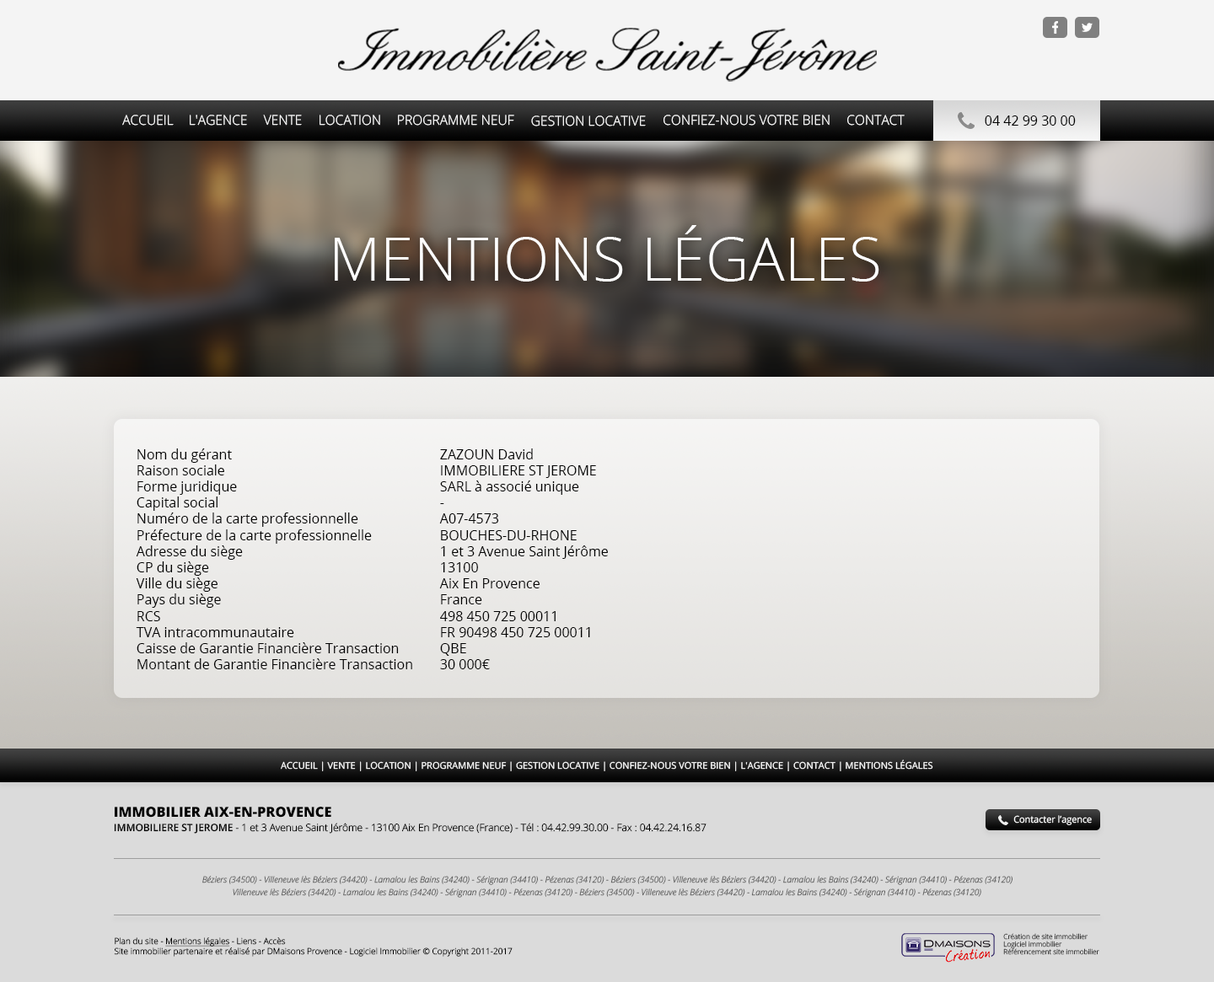
<style>
.page{position:relative;width:1214px;height:982px}
.page>*{position:absolute;margin:0}
.t1{font:13.5px "OpenSans-Light";color:#ffffff;text-transform:uppercase}
.t2{font:13.5px "OpenSans";color:#000000;text-transform:uppercase}
.t3{font:60.1px "OpenSans-Light";color:#ffffff;text-transform:uppercase}
.t4{font:13.5px "OpenSans";color:#000000}
.t5{font:9.3px "OpenSans";color:#ffffff;text-transform:uppercase}
.t6{font:10px/13.9px "OpenSans-Light";color:#000000}
.t7{font:13.9px/21.6px "OpenSans-Extrabold";color:#000000}
.t8{font:10px/13.9px "OpenSans-Semibold";color:#000000}
.t9{font:9.5px "OpenSans";color:#ffffff;scale:0.96 1}
.t10{font:8.5px "OpenSansLight-Italic";color:#626262}
.t11{font:8.5px/10px "OpenSans-Light";color:#010101}
.t12{font:8.5px/10px "OpenSans-Light";color:#010101;text-decoration:underline}
.t13{font:6.9px/7.7px "OpenSans-Light";color:#3b3b3b}
</style>
<div class="page">
<p class="t1" style="left:122px;top:115px;width:52px;height:11px">Accueil</p>
<p class="t1" style="left:190px;top:115px;width:57px;height:11px">L'agence</p>
<p class="t1" style="left:263px;top:115px;width:39px;height:11px">VENTE</p>
<p class="t1" style="left:320px;top:115px;width:60px;height:11px">LOCATION</p>
<p class="t1" style="left:398px;top:115px;width:116px;height:11px">Programme neuf</p>
<p class="t1" style="left:531px;top:116px;width:115px;height:10px">GESTION LOCATIVE</p>
<p class="t1" style="left:664px;top:115px;width:166px;height:11px">Confiez-nous votre bien</p>
<p class="t1" style="left:847px;top:115px;width:58px;height:11px">Contact</p>
<p class="t2" style="left:985px;top:116px;width:91px;height:10px">04 42 99 30 00</p>
<p class="t3" style="left:335px;top:225px;width:544px;height:57px">Mentions Légales</p>
<p class="t4" style="left:136px;top:449px;width:472px;height:220px">Nom du gérant                                           ZAZOUN David<br>Raison sociale                                                   IMMOBILIERE ST JEROME<br>Forme juridique                                          SARL à associé unique<br>Capital social                                                   -<br>Numéro de la carte professionnelle        A07-4573<br>Préfecture de la carte professionnelle        BOUCHES-DU-RHONE<br>Adresse du siège                                          1 et 3 Avenue Saint Jérôme<br>CP du siège                                                  13100<br>Ville du siège                                                   Aix En Provence<br>Pays du siège                                                   France<br>RCS              498 450 725 00011<br>TVA intracommunautaire         FR 90498 450 725 00011<br>Caisse de Garantie Financière Transaction  QBE<br>Montant de Garantie Financière Transaction 30 000€</p>
<p class="t5" style="left:281px;top:760px;width:652px;height:11px">ACCUEIL | VENTE | LOCATION | PROGRAMME NEUF | GESTION LOCATIVE | CONFIEZ-NOUS VOTRE BIEN | L'AGENCE | CONTACT | MENTIONS LÉGALES</p>
<p class="t6" style="left:114px;top:807px;width:593px;height:27px"><span class="t7">IMMOBILIER AIX-EN-PROVENCE<br></span><span class="t8">IMMOBILIERE ST JEROME</span> - 1 et 3 Avenue Saint Jérôme - 13100 Aix En Provence (France) - Tél : 04.42.99.30.00 - Fax : 04.42.24.16.87</p>
<p class="t9" style="left:1013px;top:815px;width:79px;height:10px">Contacter l’agence</p>
<p class="t10" style="left:202px;top:876px;width:811px;height:9px">Béziers (34500) - Villeneuve lès Béziers (34420) - Lamalou les Bains (34240) - Sérignan (34410) - Pézenas (34120) - Béziers (34500) - Villeneuve lès Béziers (34420) - Lamalou les Bains (34240) - Sérignan (34410) - Pézenas (34120)</p>
<p class="t10" style="left:233px;top:889px;width:748px;height:9px">Villeneuve lès Béziers (34420) - Lamalou les Bains (34240) - Sérignan (34410) - Pézenas (34120) - Béziers (34500) - Villeneuve lès Béziers (34420) - Lamalou les Bains (34240) - Sérignan (34410) - Pézenas (34120)</p>
<p class="t11" style="left:114px;top:938px;width:399px;height:19px">Plan du site - <span class="t12">Mentions légales</span> - Liens - Accès <br>Site immobilier partenaire et réalisé par DMaisons Provence - Logiciel Immobilier © Copyright 2011-2017</p>
<p class="t13" style="left:1003px;top:933px;width:96px;height:22px">Création de site immobilier<br>Logiciel immobilier <br>Référencement site immobilier</p>
</div>
